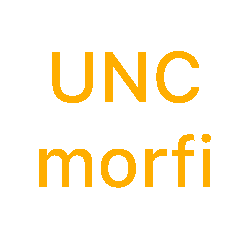
<style>
.page{position:relative;width:250px;height:250px;background:#ffffff}
.page>*{position:absolute;margin:0}
.t1{font:70.8px "SFProText-Medium";color:#ffae00}
</style>
<div class="page">
<p class="t1" style="left:39px;top:51px;width:172px;height:137px;text-align:center">UNC<br>morfi</p>
</div>
